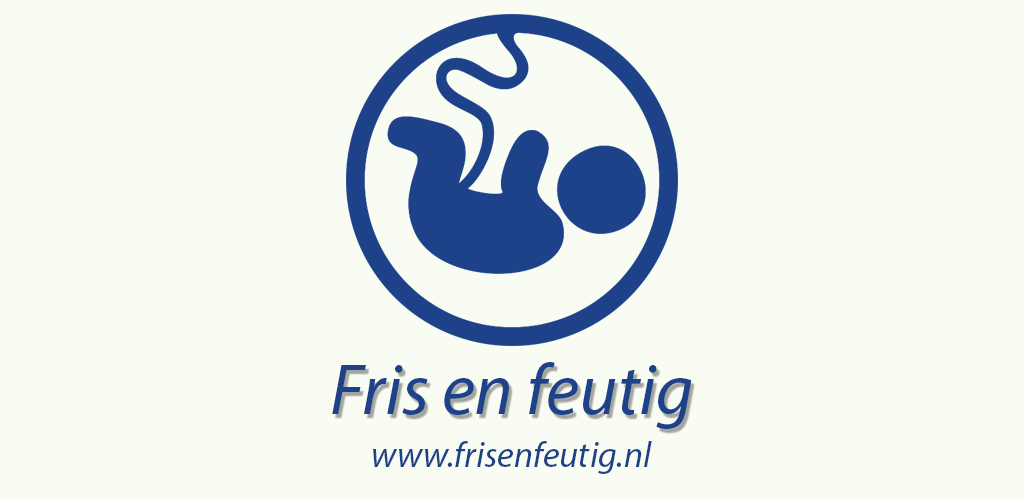
<style>
.page{position:relative;width:1024px;height:500px;background:#f9fcf2}
.page>*{position:absolute;margin:0}
.t1{font:72px "MyriadPro-It";color:#1d428a}
.t2{font:36px "MyriadPro-It";color:#1d428a}
</style>
<div class="page">
<p class="t1" style="left:332px;top:362px;width:360px;height:67px">Fris en feutig</p>
<p class="t2" style="left:373px;top:441px;width:279px;height:33px">www.frisenfeutig.nl</p>
</div>
